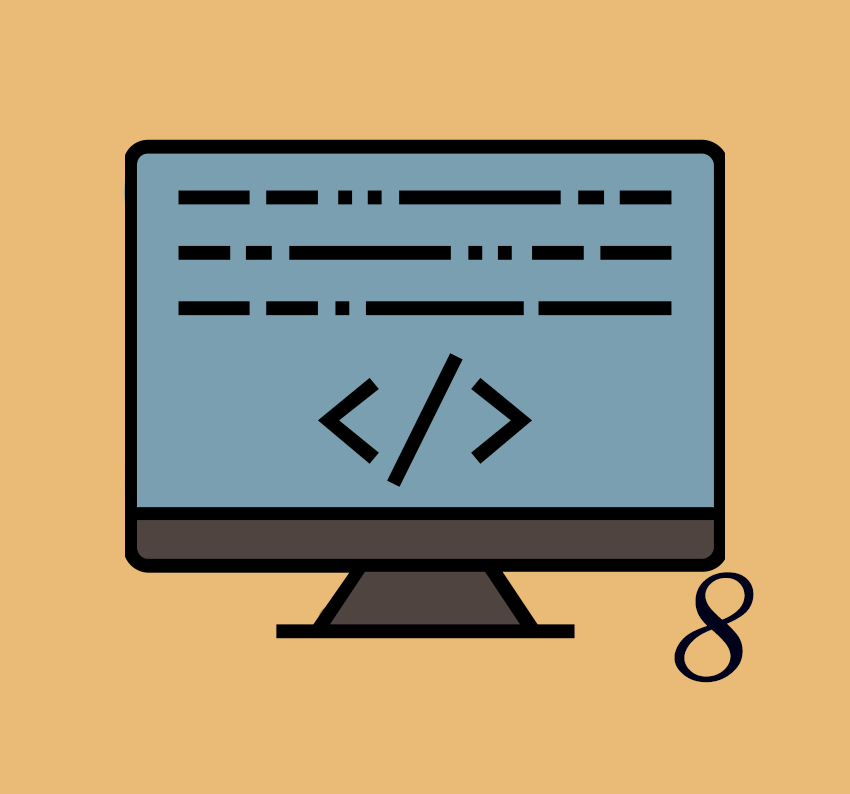
<style>
.page{position:relative;width:850px;height:794px;background:#e9bb76}
.page>*{position:absolute;margin:0}
.t1{font:155.5px "CenturySchoolbook-Italic";color:#00011b}
</style>
<div class="page">
<p class="t1" style="left:674px;top:572px;width:80px;height:111px">8</p>
</div>
